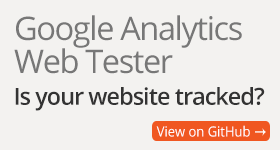
<style>
.page{position:relative;width:280px;height:150px;background:#f3f2f0}
.page>*{position:absolute;margin:0}
.t1{font:32.4px/33px "OpenSans";letter-spacing:-0.04em;color:#777777}
.t2{font:23.4px "OpenSans-Semibold";letter-spacing:-0.04em;color:#333333}
.t3{font:14.1px "OpenSans";color:#ffffff;scale:0.92 1}
</style>
<div class="page">
<p class="t1" style="left:14px;top:15px;width:228px;height:59px">Google Analytics<br>Web Tester</p>
<p class="t2" style="left:15px;top:87px;width:250px;height:24px">Is your website tracked?</p>
<p class="t3" style="left:156px;top:125px;width:94px;height:12px">View on GitHub</p>
</div>
